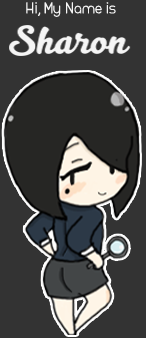
<style>
.page{position:relative;width:146px;height:338px;background:#333333}
.page>*{position:absolute;margin:0}
.t1{font:18px "MAXWELLREGULAR";color:#f5f5f5}
</style>
<div class="page">
<p class="t1" style="left:26px;top:2px;width:90px;height:15px">Hi, My Name is</p>
</div>
